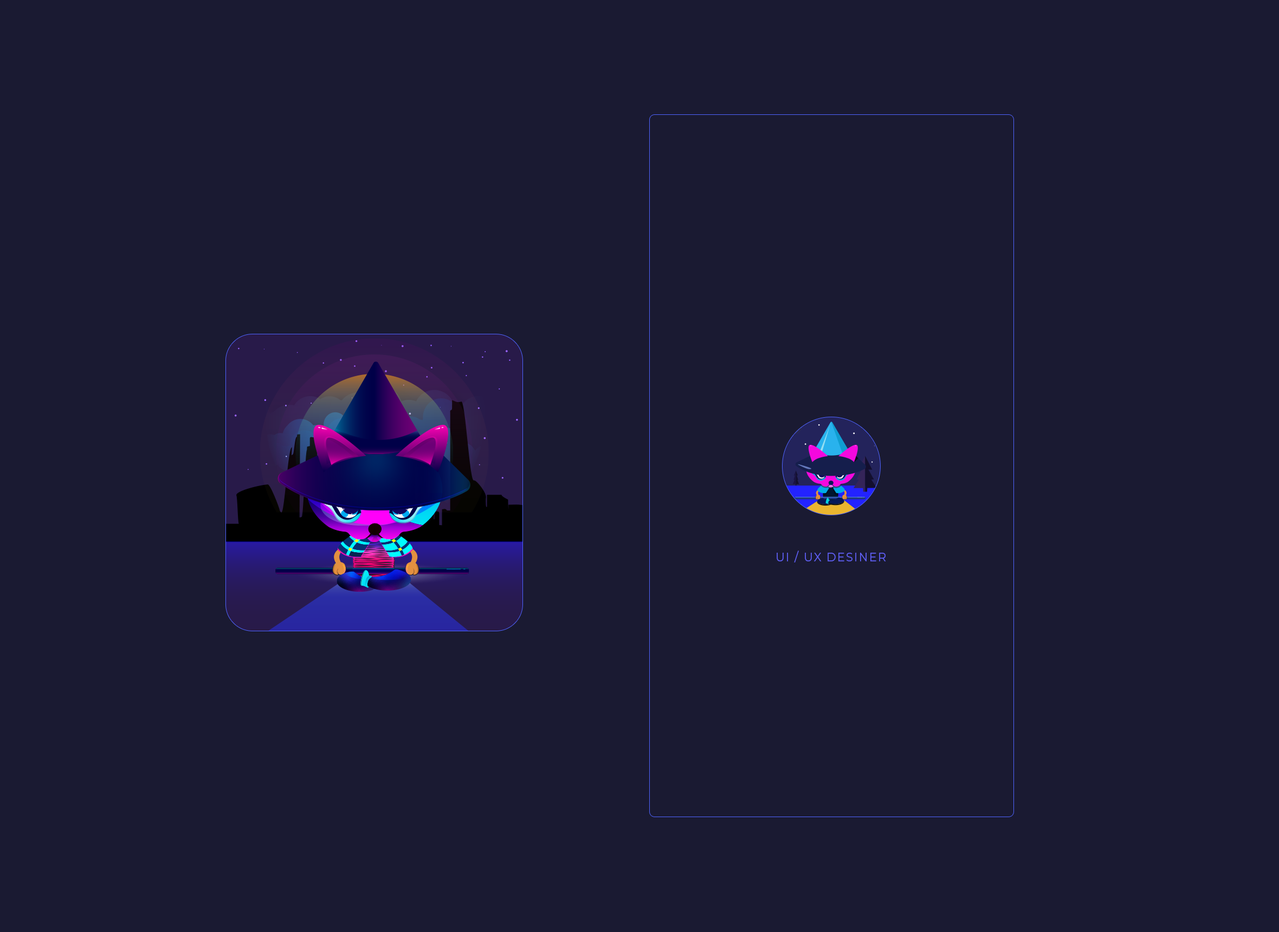
<style>
.page{position:relative;width:1279px;height:932px;background:#1a1a32}
.page>*{position:absolute;margin:0}
.t1{font:12.3px "Montserrat-Regular";letter-spacing:0.1em;color:#5e5ef1;scale:0.93 1}
</style>
<div class="page">
<p class="t1" style="left:777px;top:551px;width:109px;height:12px">UI / UX DESINER</p>
</div>
